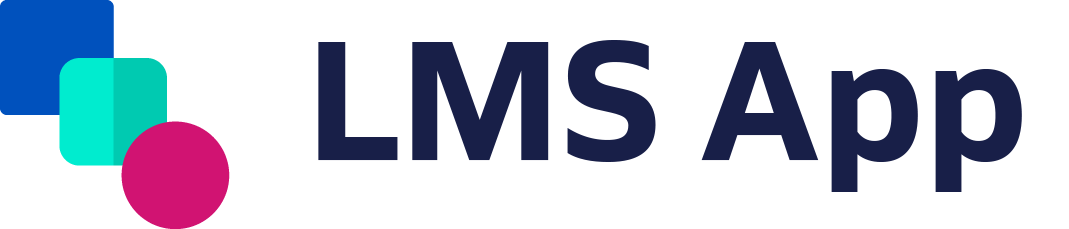
<style>
.page{position:relative;width:1069px;height:229px;background:#ffffff}
.page>*{position:absolute;margin:0}
.t1{font:173.6px "Siro-Bold";color:#181f48}
</style>
<div class="page">
<p class="t1" style="left:318px;top:40px;width:704px;height:152px">LMS App</p>
</div>
